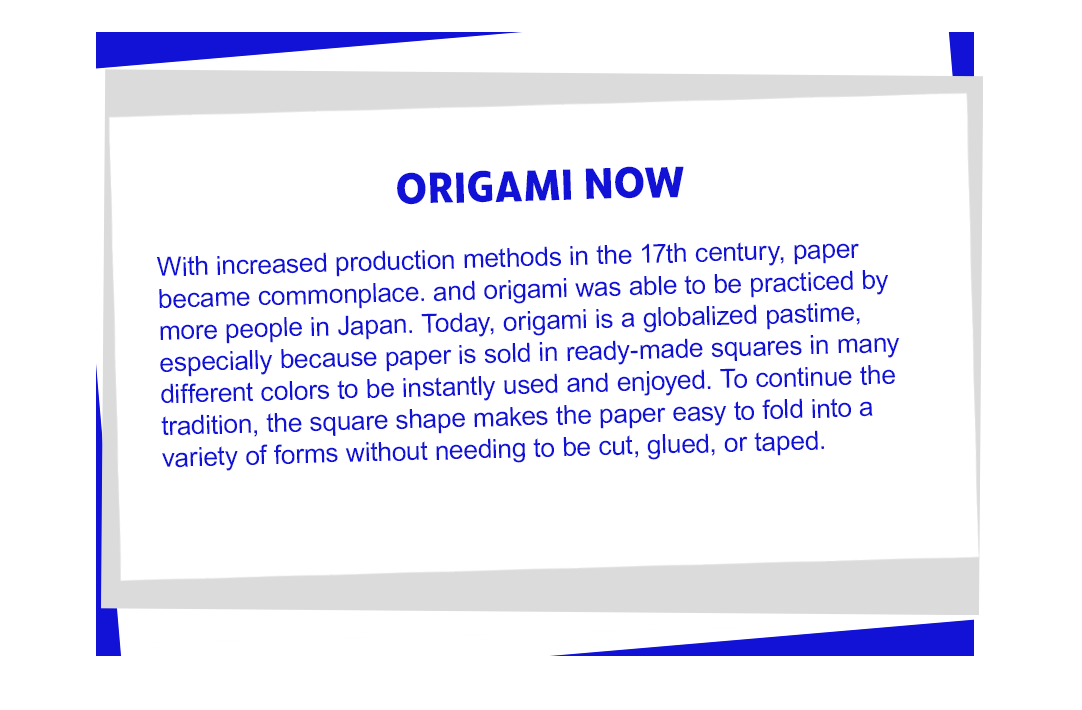
<style>
.page{position:relative;width:1082px;height:710px;background:#ffffff}
.page>*{position:absolute;margin:0}
.t1{font:26.5px "ArialMT";letter-spacing:-0.005em;color:#1212d7}
.t2{font:44.8px "RuckSack-Bold";color:#1212d7;text-transform:uppercase}
</style>
<div class="page">
<p class="t1" style="left:156px;top:166px;width:744px;height:305px;text-align:center;rotate:-2deg"><span class="t2">Origami NOW<br><br></span>With increased production methods in the 17th century, paper became commonplace. and origami was able to be practiced by more people in Japan. Today, origami is a globalized pastime, <br>especially because paper is sold in ready-made squares in many different colors to be instantly used and enjoyed. To continue the tradition, the square shape makes the paper easy to fold into a <br>variety of forms without needing to be cut, glued, or taped.</p>
</div>
